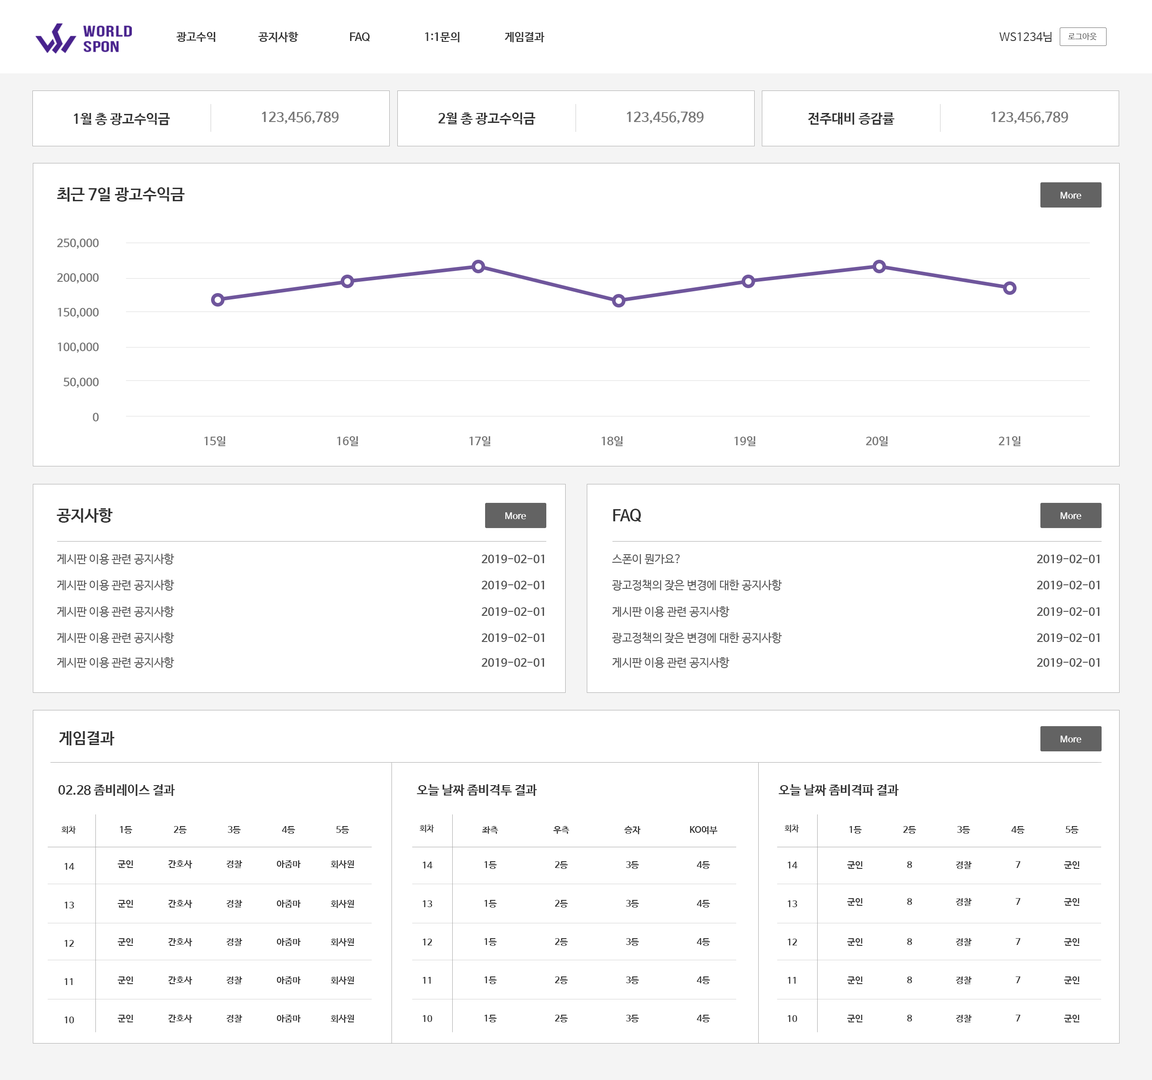
<style>
.page{position:relative;width:1152px;height:1080px;background:#ffffff}
.page>*{position:absolute;margin:0}
.t1{font:11.3px "NanumBarunGothicBold";color:#333333;text-transform:uppercase}
.t2{font:11.3px "NanumBarunGothic";color:#333333;text-transform:uppercase}
.t3{font:8.1px "NanumBarunGothic";color:#555555;text-transform:uppercase}
.t4{font:13.5px "NanumBarunGothicBold";color:#333333;text-transform:uppercase}
.t5{font:13.5px "NanumBarunGothicBold";color:#777777;text-transform:uppercase}
.t6{font:15.8px "NanumBarunGothicBold";color:#333333;text-transform:uppercase}
.t7{font:9px "NanumBarunGothicBold";color:#ffffff}
.t8{font:9px "NanumBarunGothicBold";color:#ffffff;text-transform:uppercase}
.t9{font:11.3px "NanumBarunGothicBold";color:#777777;text-transform:uppercase}
.t10{font:11.3px "NanumBarunGothic";color:#555555;text-transform:uppercase}
.t11{font:11.3px "NanumBarunGothicBold";color:#555555;text-transform:uppercase}
.t12{font:12.6px "NanumBarunGothicBold";color:#333333;text-transform:uppercase}
.t13{font:8.1px "NanumBarunGothicBold";color:#333333;text-transform:uppercase}
.t14{font:9px "NanumBarunGothicBold";color:#333333;text-transform:uppercase}
</style>
<div class="page">
<p class="t1" style="left:176px;top:32px;width:40px;height:10px">광고수익</p>
<p class="t1" style="left:258px;top:32px;width:40px;height:10px">공지사항</p>
<p class="t1" style="left:350px;top:32px;width:20px;height:9px">faq</p>
<p class="t1" style="left:425px;top:32px;width:34px;height:10px">1:1문의</p>
<p class="t1" style="left:504px;top:32px;width:41px;height:10px">게임결과</p>
<p class="t2" style="left:999px;top:32px;width:53px;height:10px">ws1234님</p>
<p class="t3" style="left:1068px;top:33px;width:29px;height:7px">로그아웃</p>
<p class="t4" style="left:74px;top:113px;width:96px;height:12px">1월 총 광고수익금</p>
<p class="t5" style="left:262px;top:112px;width:77px;height:12px">123,456,789</p>
<p class="t4" style="left:438px;top:113px;width:98px;height:12px">2월 총 광고수익금</p>
<p class="t5" style="left:627px;top:112px;width:77px;height:12px">123,456,789</p>
<p class="t4" style="left:808px;top:113px;width:87px;height:12px">전주대비 증감률</p>
<p class="t5" style="left:991px;top:112px;width:77px;height:12px">123,456,789</p>
<p class="t6" style="left:57px;top:187px;width:128px;height:15px">최근 7일 광고수익금</p>
<p class="t7" style="left:1061px;top:192px;width:20px;height:7px"><span class="t8">m</span>ore</p>
<p class="t9" style="left:57px;top:239px;width:42px;height:10px">250,000</p>
<p class="t9" style="left:57px;top:273px;width:42px;height:11px">200,000</p>
<p class="t9" style="left:58px;top:308px;width:41px;height:10px">150,000</p>
<p class="t9" style="left:58px;top:342px;width:41px;height:11px">100,000</p>
<p class="t9" style="left:63px;top:378px;width:36px;height:10px">50,000</p>
<p class="t9" style="left:93px;top:413px;width:6px;height:8px">0</p>
<p class="t9" style="left:204px;top:436px;width:21px;height:10px">15일</p>
<p class="t9" style="left:337px;top:436px;width:21px;height:10px">16일</p>
<p class="t9" style="left:469px;top:436px;width:22px;height:10px">17일</p>
<p class="t9" style="left:602px;top:436px;width:21px;height:10px">18일</p>
<p class="t9" style="left:734px;top:436px;width:22px;height:10px">19일</p>
<p class="t9" style="left:866px;top:436px;width:22px;height:10px">20일</p>
<p class="t9" style="left:999px;top:436px;width:22px;height:10px">21일</p>
<p class="t6" style="left:57px;top:508px;width:56px;height:14px">공지사항</p>
<p class="t6" style="left:613px;top:509px;width:28px;height:13px">faq</p>
<p class="t7" style="left:505px;top:512px;width:21px;height:7px"><span class="t8">m</span>ore</p>
<p class="t7" style="left:1061px;top:512px;width:20px;height:7px"><span class="t8">m</span>ore</p>
<p class="t10" style="left:57px;top:554px;width:117px;height:10px">게시판 이용 관련 공지사항</p>
<p class="t11" style="left:482px;top:554px;width:62px;height:9px">2019-02-01</p>
<p class="t10" style="left:612px;top:554px;width:68px;height:10px">스폰이 뭔가요?</p>
<p class="t11" style="left:1037px;top:554px;width:62px;height:9px">2019-02-01</p>
<p class="t10" style="left:57px;top:580px;width:117px;height:10px">게시판 이용 관련 공지사항</p>
<p class="t11" style="left:482px;top:581px;width:62px;height:8px">2019-02-01</p>
<p class="t10" style="left:612px;top:580px;width:170px;height:10px">광고정책의 잦은 변경에 대한 공지사항</p>
<p class="t11" style="left:1037px;top:581px;width:62px;height:8px">2019-02-01</p>
<p class="t10" style="left:57px;top:606px;width:117px;height:11px">게시판 이용 관련 공지사항</p>
<p class="t11" style="left:482px;top:607px;width:62px;height:9px">2019-02-01</p>
<p class="t10" style="left:612px;top:606px;width:117px;height:11px">게시판 이용 관련 공지사항</p>
<p class="t11" style="left:1037px;top:607px;width:62px;height:9px">2019-02-01</p>
<p class="t10" style="left:57px;top:632px;width:117px;height:11px">게시판 이용 관련 공지사항</p>
<p class="t11" style="left:482px;top:633px;width:62px;height:9px">2019-02-01</p>
<p class="t10" style="left:612px;top:632px;width:170px;height:11px">광고정책의 잦은 변경에 대한 공지사항</p>
<p class="t11" style="left:1037px;top:633px;width:62px;height:9px">2019-02-01</p>
<p class="t10" style="left:57px;top:657px;width:117px;height:11px">게시판 이용 관련 공지사항</p>
<p class="t11" style="left:482px;top:658px;width:62px;height:8px">2019-02-01</p>
<p class="t10" style="left:612px;top:657px;width:117px;height:11px">게시판 이용 관련 공지사항</p>
<p class="t11" style="left:1037px;top:658px;width:62px;height:8px">2019-02-01</p>
<p class="t6" style="left:59px;top:731px;width:55px;height:14px">게임결과</p>
<p class="t7" style="left:1061px;top:735px;width:20px;height:8px"><span class="t8">m</span>ore</p>
<p class="t12" style="left:59px;top:784px;width:116px;height:12px">02.28 좀비레이스 결과</p>
<p class="t12" style="left:417px;top:784px;width:120px;height:12px">오늘 날짜 좀비격투 결과</p>
<p class="t12" style="left:779px;top:784px;width:120px;height:12px">오늘 날짜 좀비격파 결과</p>
<p class="t13" style="left:61px;top:826px;width:15px;height:7px">회차</p>
<p class="t14" style="left:120px;top:826px;width:12px;height:7px">1등</p>
<p class="t14" style="left:174px;top:826px;width:13px;height:7px">2등</p>
<p class="t14" style="left:228px;top:826px;width:13px;height:7px">3등</p>
<p class="t14" style="left:282px;top:826px;width:13px;height:7px">4등</p>
<p class="t14" style="left:336px;top:826px;width:13px;height:7px">5등</p>
<p class="t13" style="left:419px;top:824px;width:15px;height:8px">회차</p>
<p class="t14" style="left:482px;top:826px;width:16px;height:7px">좌측</p>
<p class="t14" style="left:553px;top:826px;width:16px;height:7px">우측</p>
<p class="t14" style="left:624px;top:825px;width:17px;height:9px">승자</p>
<p class="t14" style="left:690px;top:826px;width:27px;height:8px">ko여부</p>
<p class="t13" style="left:784px;top:824px;width:15px;height:8px">회차</p>
<p class="t14" style="left:849px;top:826px;width:13px;height:7px">1등</p>
<p class="t14" style="left:903px;top:826px;width:13px;height:7px">2등</p>
<p class="t14" style="left:957px;top:826px;width:13px;height:7px">3등</p>
<p class="t14" style="left:1011px;top:826px;width:14px;height:7px">4등</p>
<p class="t14" style="left:1066px;top:826px;width:13px;height:7px">5등</p>
<p class="t14" style="left:64px;top:863px;width:10px;height:6px">14</p>
<p class="t14" style="left:117px;top:860px;width:16px;height:8px">군인</p>
<p class="t14" style="left:168px;top:860px;width:24px;height:8px">간호사</p>
<p class="t14" style="left:226px;top:860px;width:16px;height:8px">경찰</p>
<p class="t14" style="left:277px;top:860px;width:24px;height:8px">아줌마</p>
<p class="t14" style="left:331px;top:860px;width:23px;height:8px">회사원</p>
<p class="t14" style="left:423px;top:861px;width:9px;height:7px">14</p>
<p class="t14" style="left:484px;top:861px;width:13px;height:8px">1등</p>
<p class="t14" style="left:555px;top:861px;width:13px;height:8px">2등</p>
<p class="t14" style="left:626px;top:861px;width:13px;height:8px">3등</p>
<p class="t14" style="left:697px;top:861px;width:13px;height:8px">4등</p>
<p class="t14" style="left:788px;top:861px;width:9px;height:7px">14</p>
<p class="t14" style="left:847px;top:861px;width:16px;height:8px">군인</p>
<p class="t14" style="left:907px;top:861px;width:5px;height:7px">8</p>
<p class="t14" style="left:956px;top:861px;width:16px;height:8px">경찰</p>
<p class="t14" style="left:1016px;top:861px;width:5px;height:7px">7</p>
<p class="t14" style="left:1064px;top:861px;width:16px;height:8px">군인</p>
<p class="t14" style="left:64px;top:901px;width:10px;height:7px">13</p>
<p class="t14" style="left:117px;top:900px;width:16px;height:7px">군인</p>
<p class="t14" style="left:168px;top:900px;width:24px;height:8px">간호사</p>
<p class="t14" style="left:226px;top:900px;width:16px;height:7px">경찰</p>
<p class="t14" style="left:277px;top:900px;width:24px;height:7px">아줌마</p>
<p class="t14" style="left:331px;top:900px;width:23px;height:8px">회사원</p>
<p class="t14" style="left:423px;top:900px;width:9px;height:7px">13</p>
<p class="t14" style="left:484px;top:900px;width:13px;height:7px">1등</p>
<p class="t14" style="left:555px;top:900px;width:13px;height:7px">2등</p>
<p class="t14" style="left:626px;top:900px;width:13px;height:7px">3등</p>
<p class="t14" style="left:697px;top:900px;width:13px;height:7px">4등</p>
<p class="t14" style="left:788px;top:900px;width:9px;height:7px">13</p>
<p class="t14" style="left:847px;top:898px;width:16px;height:7px">군인</p>
<p class="t14" style="left:907px;top:898px;width:5px;height:7px">8</p>
<p class="t14" style="left:956px;top:898px;width:16px;height:7px">경찰</p>
<p class="t14" style="left:1016px;top:898px;width:5px;height:7px">7</p>
<p class="t14" style="left:1064px;top:898px;width:16px;height:7px">군인</p>
<p class="t14" style="left:64px;top:940px;width:10px;height:6px">12</p>
<p class="t14" style="left:117px;top:938px;width:16px;height:7px">군인</p>
<p class="t14" style="left:168px;top:938px;width:24px;height:8px">간호사</p>
<p class="t14" style="left:226px;top:938px;width:16px;height:7px">경찰</p>
<p class="t14" style="left:277px;top:938px;width:24px;height:7px">아줌마</p>
<p class="t14" style="left:331px;top:938px;width:23px;height:8px">회사원</p>
<p class="t14" style="left:423px;top:938px;width:9px;height:7px">12</p>
<p class="t14" style="left:484px;top:938px;width:13px;height:7px">1등</p>
<p class="t14" style="left:555px;top:938px;width:13px;height:7px">2등</p>
<p class="t14" style="left:626px;top:938px;width:13px;height:7px">3등</p>
<p class="t14" style="left:697px;top:938px;width:13px;height:7px">4등</p>
<p class="t14" style="left:788px;top:938px;width:9px;height:7px">12</p>
<p class="t14" style="left:847px;top:938px;width:16px;height:7px">군인</p>
<p class="t14" style="left:907px;top:938px;width:5px;height:7px">8</p>
<p class="t14" style="left:956px;top:938px;width:16px;height:7px">경찰</p>
<p class="t14" style="left:1016px;top:938px;width:5px;height:7px">7</p>
<p class="t14" style="left:1064px;top:938px;width:16px;height:7px">군인</p>
<p class="t14" style="left:64px;top:978px;width:8px;height:7px">11</p>
<p class="t14" style="left:117px;top:976px;width:16px;height:8px">군인</p>
<p class="t14" style="left:168px;top:976px;width:24px;height:8px">간호사</p>
<p class="t14" style="left:226px;top:976px;width:16px;height:8px">경찰</p>
<p class="t14" style="left:277px;top:976px;width:24px;height:8px">아줌마</p>
<p class="t14" style="left:331px;top:976px;width:23px;height:8px">회사원</p>
<p class="t14" style="left:423px;top:977px;width:8px;height:6px">11</p>
<p class="t14" style="left:484px;top:976px;width:13px;height:8px">1등</p>
<p class="t14" style="left:555px;top:976px;width:13px;height:8px">2등</p>
<p class="t14" style="left:626px;top:976px;width:13px;height:8px">3등</p>
<p class="t14" style="left:697px;top:976px;width:13px;height:8px">4등</p>
<p class="t14" style="left:788px;top:977px;width:8px;height:6px">11</p>
<p class="t14" style="left:847px;top:976px;width:16px;height:8px">군인</p>
<p class="t14" style="left:907px;top:976px;width:5px;height:7px">8</p>
<p class="t14" style="left:956px;top:976px;width:16px;height:8px">경찰</p>
<p class="t14" style="left:1016px;top:976px;width:5px;height:7px">7</p>
<p class="t14" style="left:1064px;top:976px;width:16px;height:8px">군인</p>
<p class="t14" style="left:64px;top:1016px;width:10px;height:7px">10</p>
<p class="t14" style="left:117px;top:1014px;width:16px;height:8px">군인</p>
<p class="t14" style="left:168px;top:1014px;width:24px;height:8px">간호사</p>
<p class="t14" style="left:226px;top:1014px;width:16px;height:8px">경찰</p>
<p class="t14" style="left:277px;top:1014px;width:24px;height:8px">아줌마</p>
<p class="t14" style="left:331px;top:1014px;width:23px;height:8px">회사원</p>
<p class="t14" style="left:423px;top:1015px;width:9px;height:7px">10</p>
<p class="t14" style="left:484px;top:1014px;width:13px;height:8px">1등</p>
<p class="t14" style="left:555px;top:1014px;width:13px;height:8px">2등</p>
<p class="t14" style="left:626px;top:1014px;width:13px;height:8px">3등</p>
<p class="t14" style="left:697px;top:1014px;width:13px;height:8px">4등</p>
<p class="t14" style="left:788px;top:1015px;width:9px;height:7px">10</p>
<p class="t14" style="left:847px;top:1014px;width:16px;height:8px">군인</p>
<p class="t14" style="left:907px;top:1014px;width:5px;height:7px">8</p>
<p class="t14" style="left:956px;top:1014px;width:16px;height:8px">경찰</p>
<p class="t14" style="left:1016px;top:1014px;width:5px;height:7px">7</p>
<p class="t14" style="left:1064px;top:1014px;width:16px;height:8px">군인</p>
</div>
